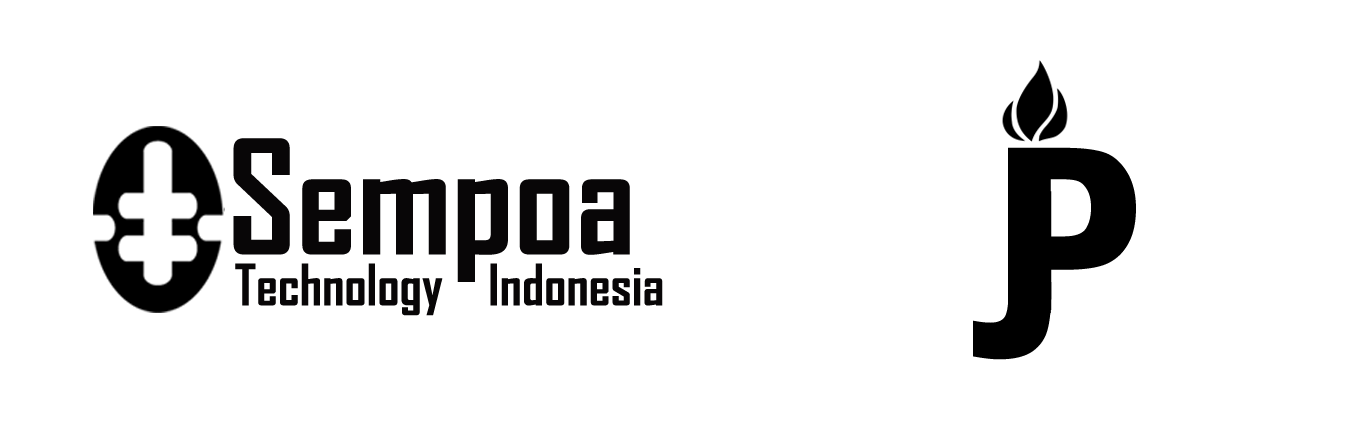
<style>
.page{position:relative;width:1366px;height:440px;background:#ffffff}
.page>*{position:absolute;margin:0}
.t1{font:151.9px "AgencyFB-Bold";color:#080607}
.t2{font:54.7px "AgencyFB-Bold";color:#080607}
</style>
<div class="page">
<p class="t1" style="left:233px;top:138px;width:397px;height:144px">Sempoa</p>
<p class="t2" style="left:235px;top:263px;width:428px;height:53px">Technology    Indonesia</p>
</div>
